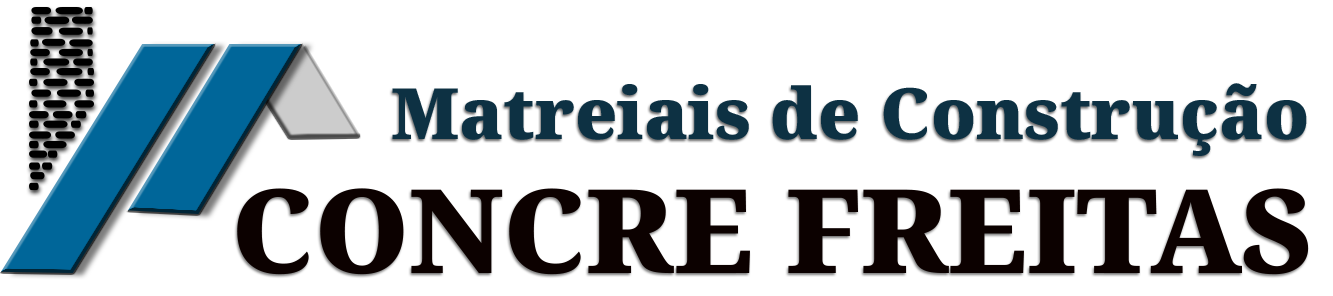
<style>
.page{position:relative;width:1333px;height:296px;background:#ffffff}
.page>*{position:absolute;margin:0}
.t1{font:70.8px "NotoSerifTelugu-Black";color:#0d3143}
.t2{font:116.7px "NotoSerifTelugu-Black";color:#0c0100}
</style>
<div class="page">
<p class="t1" style="left:392px;top:83px;width:915px;height:73px">Matreiais de Construção</p>
<p class="t2" style="left:237px;top:188px;width:1072px;height:87px">CONCRE FREITAS</p>
</div>
